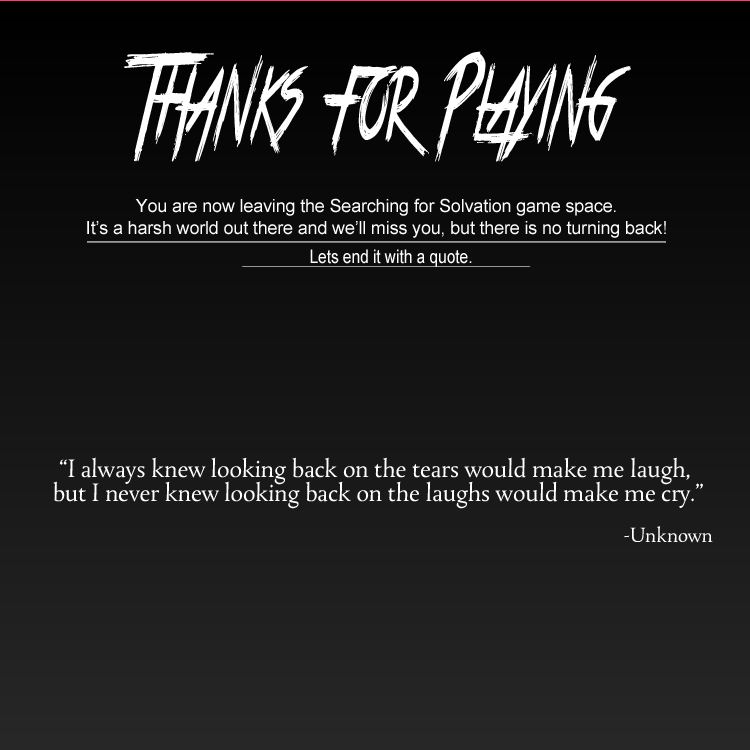
<style>
.page{position:relative;width:750px;height:750px}
.page>*{position:absolute;margin:0}
.t1{font:105.2px "TrueLies";letter-spacing:-0.01em;color:#ffffff;scale:0.54 1}
.t2{font:18px "ArialMT";letter-spacing:-0.01em;color:#ffffff}
.t3{font:18.8px "ArialMT";letter-spacing:-0.01em;color:#ffffff;scale:0.84 1}
.t4{font:30px/24px "Tallys";letter-spacing:-0.01em;color:#ffffff}
.t5{font:24.5px "Tallys";letter-spacing:-0.01em;color:#ffffff}
</style>
<div class="page">
<p class="t1" style="left:124px;top:51px;width:507px;height:111px">Thanks for Playing</p>
<p class="t2" style="left:87px;top:198px;width:579px;height:40px;text-align:center">You are now leaving the Searching for Solvation game space. <br>It’s a harsh world out there and we’ll miss you, but there is no turning back!</p>
<p class="t3" style="left:310px;top:249px;width:162px;height:18px">Lets end it with a quote.</p>
<p class="t4" style="left:53px;top:457px;width:650px;height:52px;text-align:center">“I always knew looking back on the tears would make me laugh,<br> but I never knew looking back on the laughs would make me cry.”</p>
<p class="t5" style="left:624px;top:526px;width:89px;height:17px">-Unknown</p>
</div>
